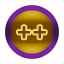
<style>
.page{position:relative;width:64px;height:64px;background:#ffffff}
.page>*{position:absolute;margin:0}
.t1{font:18px "Verdana-Bold";color:#5b461d}
</style>
<div class="page">
<p class="t1" style="left:18px;top:26px;width:28px;height:13px">++</p>
</div>
